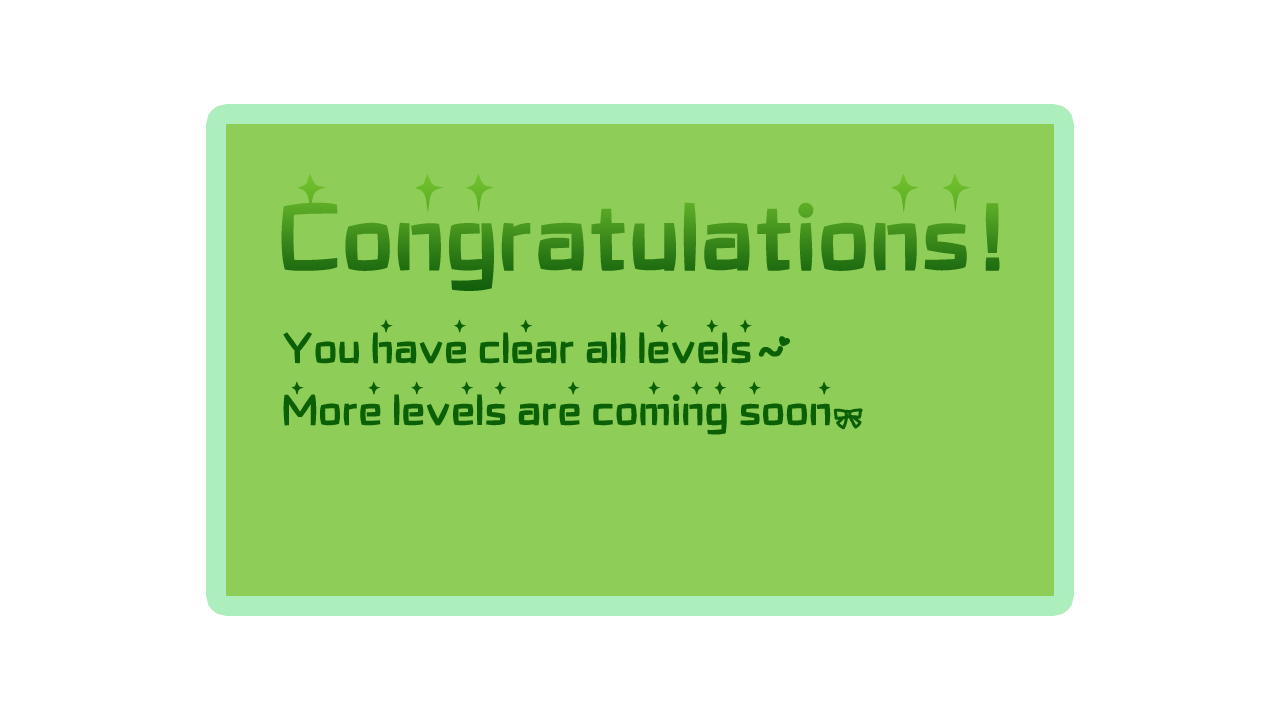
<style>
.page{position:relative;width:1280px;height:720px;background:#ffffff}
.page>*{position:absolute;margin:0}
.t1{font:110px "STHeitiSC-Medium";letter-spacing:0.075em;color:#378519;font-weight:bold}
.t2{font:50px/62px "STHeitiSC-Medium";letter-spacing:0.075em;color:#0b5f05;font-weight:bold}
</style>
<div class="page">
<p class="t1" style="left:281px;top:173px;width:719px;height:118px">Congratulations !</p>
<p class="t2" style="left:283px;top:319px;width:580px;height:116px">You  have  clear  all  levels ~<br>More  levels  are  coming  soon.</p>
</div>
